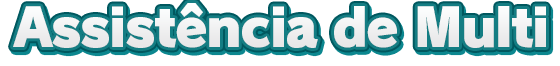
<style>
.page{position:relative;width:560px;height:66px;background:#ffffff}
.page>*{position:absolute;margin:0}
.t1{font:52px "RodinPro-UB";letter-spacing:-0.039em;color:#efeff0}
</style>
<div class="page">
<p class="t1" style="left:13px;top:3px;width:533px;height:45px">Assistência de Multi</p>
</div>
